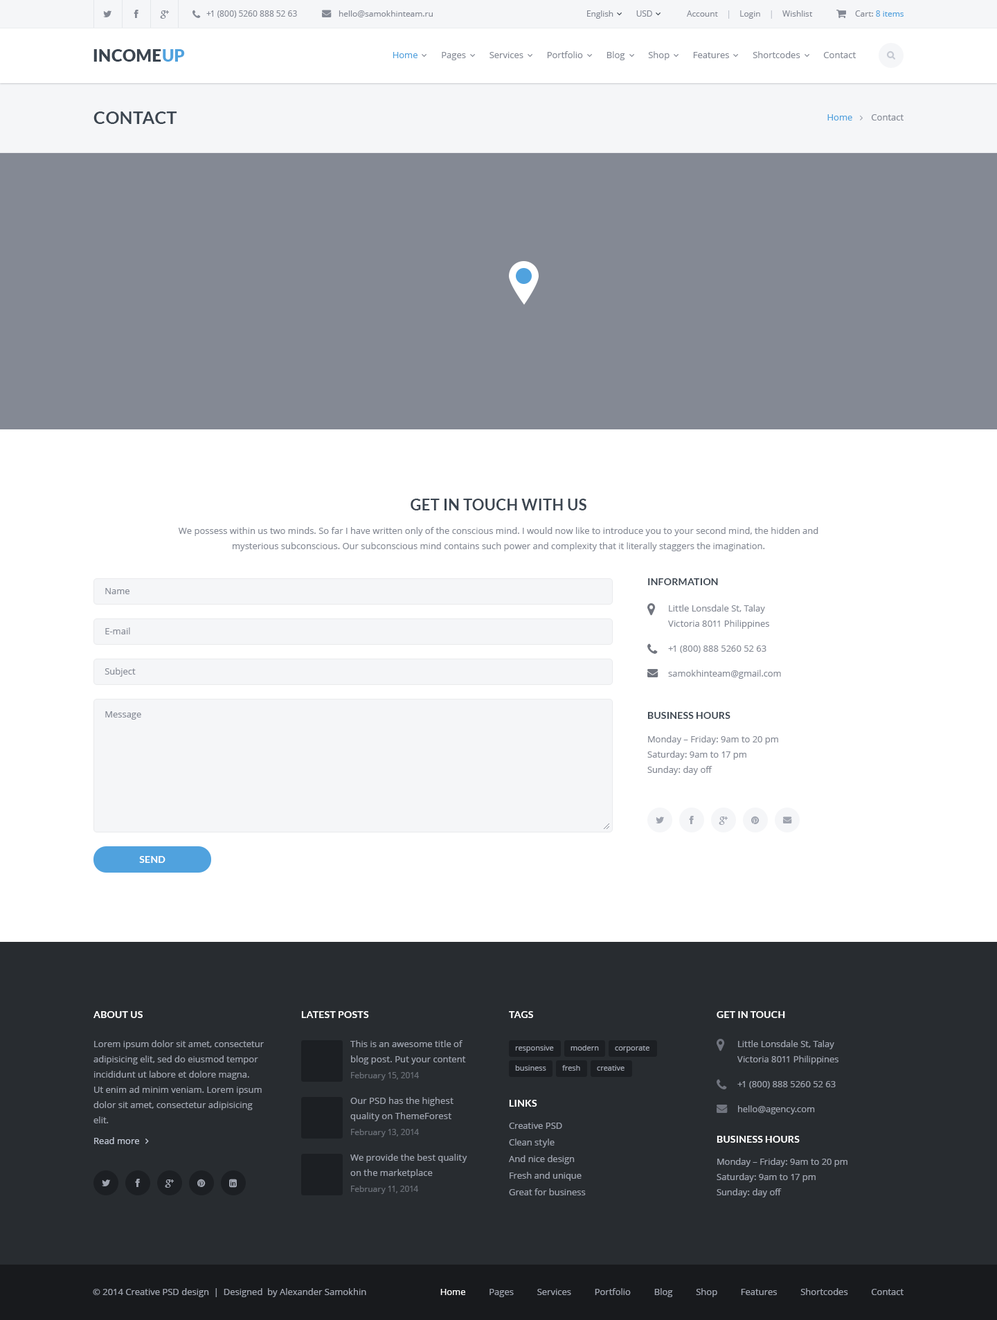
<style>
.page{position:relative;width:997px;height:1320px;background:#ffffff}
.page>*{position:absolute;margin:0}
.t1{font:8.3px "OpenSans";color:#848994}
.t2{font:8.3px "OpenSans";color:#bfc4cd}
.t3{font:8.3px "OpenSans";color:#50a2de}
.t4{font:16.6px "Lato-Black";letter-spacing:0.02em;color:#3b4550}
.t5{font:16.6px "Lato-Black";letter-spacing:0.02em;color:#50a2de}
.t6{font:9px "OpenSans";color:#848994}
.t7{font:9px "OpenSans";color:#50a2de}
.t8{font:17.3px "Lato-Bold";letter-spacing:0.02em;color:#3b4550;text-transform:uppercase}
.t9{font:15.2px "Lato-Bold";letter-spacing:0.02em;color:#3b4550;text-transform:uppercase}
.t10{font:9px/15.2px "OpenSans";color:#848994}
.t11{font:9.7px "Lato-Bold";letter-spacing:0.02em;color:#3b4550}
.t12{font:9.7px "Lato-Bold";letter-spacing:0.02em;color:#3b4550;text-transform:uppercase}
.t13{font:9.7px "Lato-Bold";letter-spacing:0.02em;color:#ffffff}
.t14{font:9.7px "Lato-Bold";letter-spacing:0.02em;color:#ffffff;text-transform:uppercase}
.t15{font:9px/15.2px "OpenSans";color:#9fa4af}
.t16{font:7.6px "OpenSans";color:#9fa4af}
.t17{font:8.3px "OpenSans";color:#6b7078}
.t18{font:9px "OpenSans";color:#9fa4af}
.t19{font:9px/16.6px "OpenSans";color:#9fa4af}
.t20{font:9px "OpenSans";color:#c2c9d6}
.t21{font:9px "OpenSans";color:#ffffff}
</style>
<div class="page">
<p class="t1" style="left:206px;top:10px;width:91px;height:8px">+1 (800) 5260 888 52 63</p>
<p class="t1" style="left:339px;top:10px;width:94px;height:7px">hello@samokhinteam.ru</p>
<p class="t1" style="left:587px;top:10px;width:26px;height:9px">English</p>
<p class="t1" style="left:636px;top:10px;width:16px;height:7px">USD</p>
<p class="t1" style="left:687px;top:10px;width:126px;height:9px">Account    <span class="t2">| </span>   Login    <span class="t2">|</span>    Wishlist</p>
<p class="t3" style="left:855px;top:10px;width:48px;height:7px"><span class="t1">Cart: </span>8 items</p>
<p class="t4" style="left:93px;top:49px;width:92px;height:13px">INCOME<span class="t5">UP</span></p>
<p class="t6" style="left:393px;top:51px;width:463px;height:9px"><span class="t7">Home          </span>Pages          Services          Portfolio          Blog          Shop          Features          Shortcodes          Contact</p>
<p class="t8" style="left:93px;top:111px;width:84px;height:13px">CONTACT</p>
<p class="t6" style="left:827px;top:114px;width:76px;height:6px"><span class="t7">Home        </span>Contact</p>
<p class="t9" style="left:411px;top:498px;width:175px;height:12px">GET IN TOUCH WITH US</p>
<p class="t10" style="left:178px;top:527px;width:640px;height:24px;text-align:center">We possess within us two minds. So far I have written only of the conscious mind. I would now like to introduce you to your second mind, the hidden and mysterious subconscious. Our subconscious mind contains such power and complexity that it literally staggers the imagination.</p>
<p class="t11" style="left:648px;top:578px;width:70px;height:7px">INFORMATION</p>
<p class="t6" style="left:105px;top:588px;width:24px;height:6px">Name</p>
<p class="t10" style="left:668px;top:604px;width:101px;height:25px">Little Lonsdale St, Talay<br>Victoria 8011 Philippines</p>
<p class="t6" style="left:105px;top:627px;width:25px;height:7px">E-mail</p>
<p class="t6" style="left:668px;top:645px;width:98px;height:8px">+1 (800) 888 5260 52 63</p>
<p class="t6" style="left:105px;top:667px;width:31px;height:9px">Subject</p>
<p class="t6" style="left:668px;top:669px;width:113px;height:9px">samokhinteam@gmail.com</p>
<p class="t6" style="left:105px;top:711px;width:36px;height:8px">Message</p>
<p class="t12" style="left:647px;top:712px;width:83px;height:7px">Business hours</p>
<p class="t10" style="left:647px;top:735px;width:131px;height:40px">Monday – Friday: 9am to 20 pm<br>Saturday: 9am to 17 pm<br>Sunday: day off</p>
<p class="t13" style="left:139px;top:856px;width:26px;height:7px">SEND</p>
<p class="t14" style="left:93px;top:1011px;width:50px;height:7px">ABOUT US</p>
<p class="t14" style="left:301px;top:1011px;width:68px;height:7px">LATEST POSTS</p>
<p class="t14" style="left:509px;top:1011px;width:24px;height:7px">TAGS</p>
<p class="t14" style="left:717px;top:1011px;width:68px;height:7px">GET IN TOUCH</p>
<p class="t15" style="left:93px;top:1040px;width:171px;height:83px">Lorem ipsum dolor sit amet, consectetur adipisicing elit, sed do eiusmod tempor incididunt ut labore et dolore magna.<br>Ut enim ad minim veniam. Lorem ipsum dolor sit amet, consectetur adipisicing elit.</p>
<p class="t15" style="left:350px;top:1040px;width:116px;height:24px">This is an awesome title of blog post. Put your content</p>
<p class="t16" style="left:515px;top:1045px;width:39px;height:7px">responsive</p>
<p class="t16" style="left:570px;top:1045px;width:29px;height:5px">modern</p>
<p class="t16" style="left:615px;top:1045px;width:34px;height:7px">corporate</p>
<p class="t15" style="left:737px;top:1040px;width:101px;height:24px">Little Lonsdale St, Talay<br>Victoria 8011 Philippines</p>
<p class="t17" style="left:351px;top:1072px;width:68px;height:8px">February 15, 2014</p>
<p class="t16" style="left:515px;top:1065px;width:31px;height:5px">business</p>
<p class="t16" style="left:562px;top:1065px;width:18px;height:5px">fresh</p>
<p class="t16" style="left:597px;top:1065px;width:27px;height:5px">creative</p>
<p class="t18" style="left:737px;top:1081px;width:99px;height:7px">+1 (800) 888 5260 52 63</p>
<p class="t15" style="left:350px;top:1097px;width:103px;height:24px">Our PSD has the highest quality on ThemeForest</p>
<p class="t14" style="left:509px;top:1099px;width:28px;height:7px">LINKS</p>
<p class="t18" style="left:738px;top:1105px;width:77px;height:9px">hello@agency.com</p>
<p class="t17" style="left:351px;top:1128px;width:68px;height:9px">February 13, 2014</p>
<p class="t19" style="left:509px;top:1122px;width:77px;height:73px">Creative PSD <br>Clean style <br>And nice design<br>Fresh and unique<br>Great for business</p>
<p class="t20" style="left:94px;top:1137px;width:45px;height:7px">Read more</p>
<p class="t14" style="left:717px;top:1135px;width:83px;height:7px">Business hours</p>
<p class="t15" style="left:350px;top:1153px;width:117px;height:25px">We provide the best quality on the marketplace</p>
<p class="t15" style="left:717px;top:1158px;width:130px;height:39px">Monday – Friday: 9am to 20 pm<br>Saturday: 9am to 17 pm<br>Sunday: day off</p>
<p class="t17" style="left:351px;top:1185px;width:67px;height:9px">February 11, 2014</p>
<p class="t18" style="left:93px;top:1288px;width:273px;height:9px">© 2014 Creative PSD design  |  Designed  by Alexander Samokhin</p>
<p class="t18" style="left:440px;top:1288px;width:463px;height:9px"><span class="t21">Home          </span>Pages          Services          Portfolio          Blog          Shop          Features          Shortcodes          Contact</p>
</div>
